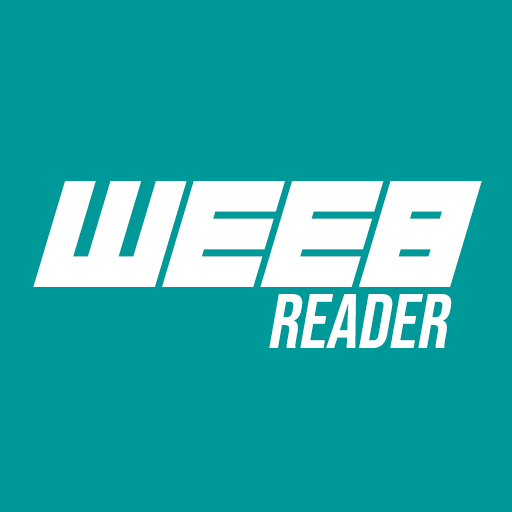
<style>
.page{position:relative;width:512px;height:512px;background:#009999}
.page>*{position:absolute;margin:0}
.t1{font:155px "NauSea";color:#ffffff;font-style:italic}
.t2{font:77px "BebasNeue-Regular";color:#ffffff;font-style:italic}
</style>
<div class="page">
<p class="t1" style="left:33px;top:181px;width:449px;height:106px">weeb</p>
<p class="t2" style="left:269px;top:294px;width:183px;height:54px">reader</p>
</div>
